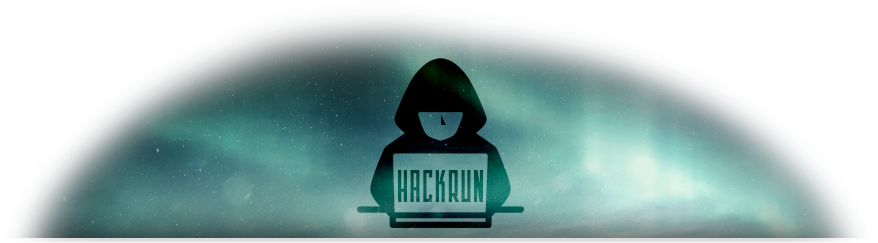
<style>
.page{position:relative;width:878px;height:243px;background:#ffffff}
.page>*{position:absolute;margin:0}
.t1{font:43.9px "ALTROGUE";color:#005f53}
</style>
<div class="page">
<p class="t1" style="left:398px;top:170px;width:85px;height:32px">HACKRUN</p>
</div>
